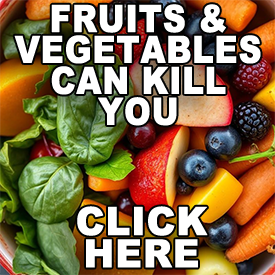
<style>
.page{position:relative;width:275px;height:275px}
.page>*{position:absolute;margin:0}
.t1{font:37.1px/30.9px "Arial-Black";color:#ffffff;font-weight:bold;scale:0.86 1}
.t2{font:38.8px/32.4px "Arial-Black";color:#ffffff;font-weight:bold;scale:0.95 1}
</style>
<div class="page">
<p class="t1" style="left:14px;top:4px;width:247px;height:122px;text-align:center">FRUITS &amp;<br>VEGETABLES<br>CAN KILL<br>YOU</p>
<p class="t2" style="left:77px;top:206px;width:131px;height:62px;text-align:center">CLICK<br>HERE</p>
</div>
